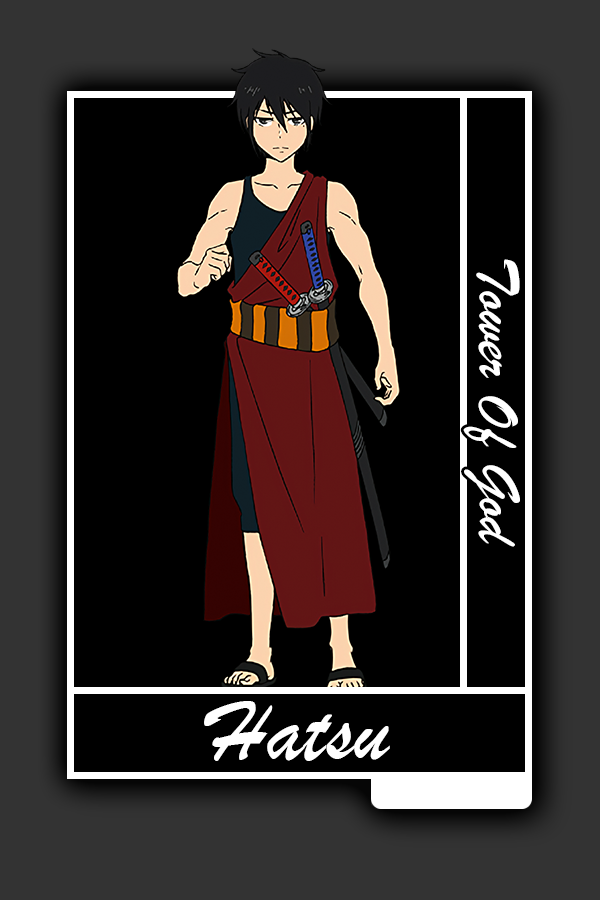
<style>
.page{position:relative;width:600px;height:900px;background:#000000}
.page>*{position:absolute;margin:0}
.t1{font:61.5px "BrushScriptMT";color:#ffffff}
.t2{font:89.7px "BrushScriptMT";color:#ffffff}
</style>
<div class="page">
<p class="t1" style="left:463px;top:259px;width:57px;height:288px;rotate:90deg">Tower Of God</p>
<p class="t2" style="left:204px;top:701px;width:186px;height:60px">Hatsu</p>
</div>
